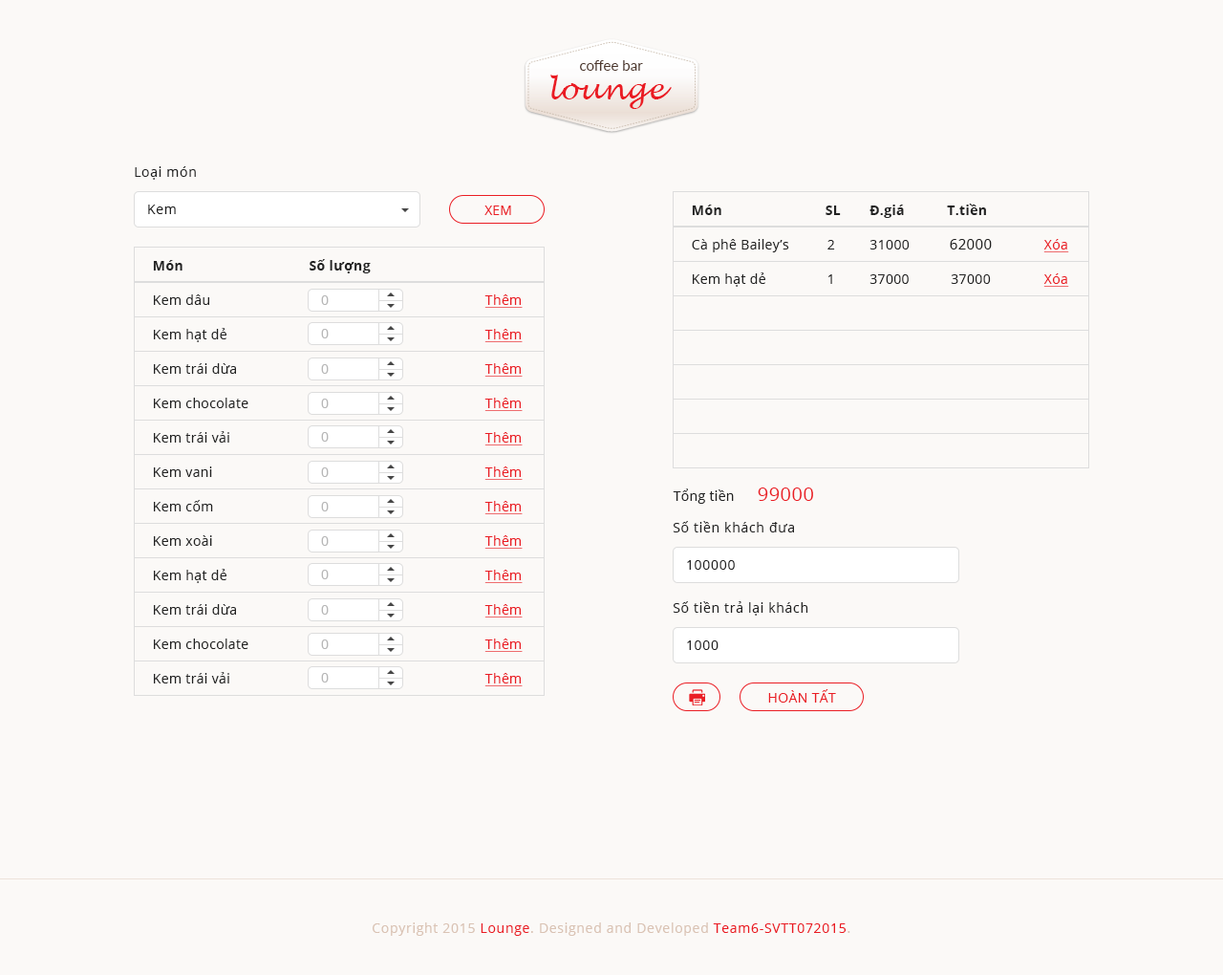
<style>
.page{position:relative;width:1223px;height:975px;background:#fbf9f7}
.page>*{position:absolute;margin:0}
.t1{font:13.4px "OpenSans";letter-spacing:0.05em;color:#222222}
.t2{font:13.4px "OpenSans";color:#ea1d24}
.t3{font:13.4px/34.4px "OpenSans-Bold";letter-spacing:0.025em;color:#222222}
.t4{font:13.4px/34.4px "OpenSans";letter-spacing:0.025em;color:#222222}
.t5{font:14.3px/34.4px "OpenSans";letter-spacing:0.025em;color:#222222}
.t6{font:13.4px/34.4px "OpenSans";letter-spacing:0.025em;color:#ea1d24;text-decoration:underline}
.t7{font:13.4px "OpenSans";letter-spacing:0.025em;color:#222222}
.t8{font:19.1px "OpenSans";letter-spacing:0.025em;color:#ea1d24}
.t9{font:13.4px "OpenSans";letter-spacing:0.025em;color:#ea1d24}
.t10{font:13.4px "OpenSans";letter-spacing:0.05em;color:#dac3b4}
.t11{font:13.4px "OpenSans";letter-spacing:0.05em;color:#ea1b23}
</style>
<div class="page">
<p class="t1" style="left:135px;top:166px;width:61px;height:14px">Loại món</p>
<p class="t1" style="left:148px;top:205px;width:28px;height:9px">Kem</p>
<p class="t2" style="left:485px;top:205px;width:26px;height:10px">XEM</p>
<p class="t3" style="left:692px;top:204px;width:377px;height:83px">Món                           SL        Đ.giá            T.tiền<br><span class="t4">Cà phê Bailey’s          2         31000  </span><span class="t5">        62000             </span><span class="t6">Xóa<br></span><span class="t4">Kem hạt dẻ                1         37000          37000              </span><span class="t6">Xóa</span></p>
<p class="t4" style="left:153px;top:259px;width:218px;height:424px"><span class="t3">Món                                 Số lượng   <br></span>Kem dâu <br>Kem hạt dẻ<br>Kem trái dừa<br>Kem chocolate<br>Kem trái vải<br>Kem vani<br>Kem cốm<br>Kem xoài <br>Kem hạt dẻ<br>Kem trái dừa<br>Kem chocolate<br>Kem trái vải</p>
<p class="t6" style="left:485px;top:294px;width:38px;height:392px">Thêm<br>Thêm<br>Thêm<br>Thêm<br>Thêm<br>Thêm<br>Thêm<br>Thêm<br>Thêm<br>Thêm<br>Thêm<br>Thêm</p>
<p class="t7" style="left:673px;top:487px;width:140px;height:17px">Tổng tiền      <span class="t8">99000</span></p>
<p class="t1" style="left:673px;top:521px;width:121px;height:11px">Số tiền khách đưa</p>
<p class="t1" style="left:687px;top:560px;width:48px;height:10px">100000</p>
<p class="t1" style="left:673px;top:601px;width:136px;height:14px">Số tiền trả lại khách</p>
<p class="t1" style="left:687px;top:640px;width:32px;height:10px">1000</p>
<p class="t9" style="left:768px;top:689px;width:68px;height:13px">HOÀN TẤT</p>
<p class="t10" style="left:373px;top:922px;width:478px;height:14px">Copyright 2015 <span class="t11">Lounge</span>. Designed and Developed <span class="t11">Team6-SVTT072015</span>.</p>
</div>
